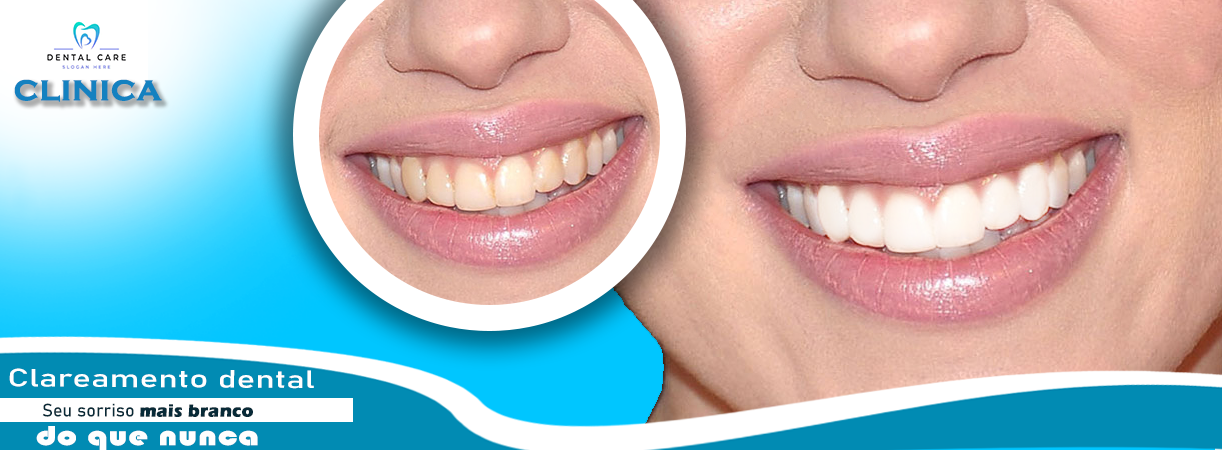
<style>
.page{position:relative;width:1222px;height:450px}
.page>*{position:absolute;margin:0}
.t1{font:36px "CopperplateGothic-Bold";color:#1481c0;font-weight:bold}
.t2{font:24.6px "Bahnschrift";color:#ffffff;font-weight:bold;scale:1.42 1}
.t3{font:18px "Bahnschrift";color:#082a37;font-weight:bold}
.t4{font:18px "ErasITC-Bold";color:#082a37;font-weight:bold}
.t5{font:28.2px "Bauhaus93";color:#fefefe;font-weight:bold;scale:1.24 1}
</style>
<div class="page">
<p class="t1" style="left:14px;top:79px;width:148px;height:23px">clinica</p>
<p class="t2" style="left:9px;top:368px;width:305px;height:21px">Clareamento dental</p>
<p class="t3" style="left:42px;top:403px;width:211px;height:14px">Seu sorriso <span class="t4">mais branco</span></p>
<p class="t5" style="left:36px;top:426px;width:222px;height:25px">do que nunca</p>
</div>
